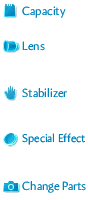
<style>
.page{position:relative;width:88px;height:200px;background:#ffffff}
.page>*{position:absolute;margin:0}
.t1{font:12px "Amira-Light";color:#0082bb}
.t2{font:11.4px "Amira-Light";color:#0082bb}
</style>
<div class="page">
<p class="t1" style="left:22px;top:6px;width:44px;height:12px">Capacity</p>
<p class="t1" style="left:22px;top:41px;width:23px;height:10px">Lens</p>
<p class="t1" style="left:22px;top:88px;width:45px;height:10px">Stabilizer</p>
<p class="t2" style="left:22px;top:133px;width:63px;height:12px">Special Effect</p>
<p class="t1" style="left:22px;top:181px;width:64px;height:12px">Change Parts</p>
</div>
